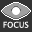
<style>
.page{position:relative;width:32px;height:32px;background:#333333}
.page>*{position:absolute;margin:0}
.t1{font:8px "LucidaGrande";color:#ffffff}
</style>
<div class="page">
<p class="t1" style="left:3px;top:21px;width:26px;height:7px">FOCUS</p>
</div>
